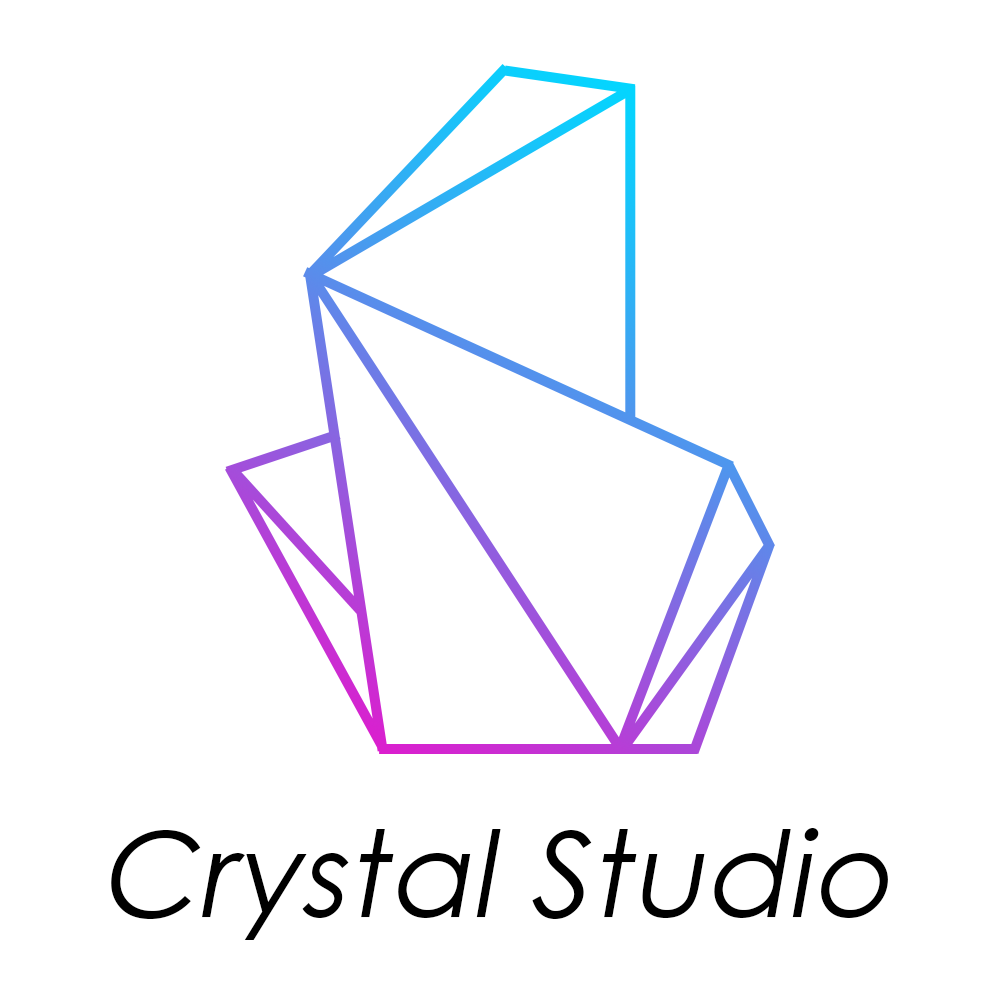
<style>
.page{position:relative;width:1000px;height:1000px;background:#ffffff}
.page>*{position:absolute;margin:0}
.t1{font:118.7px "CenturyGothic";letter-spacing:0.01em;color:#000000;font-style:italic}
</style>
<div class="page">
<p class="t1" style="left:111px;top:828px;width:777px;height:112px">Crystal Studio</p>
</div>
